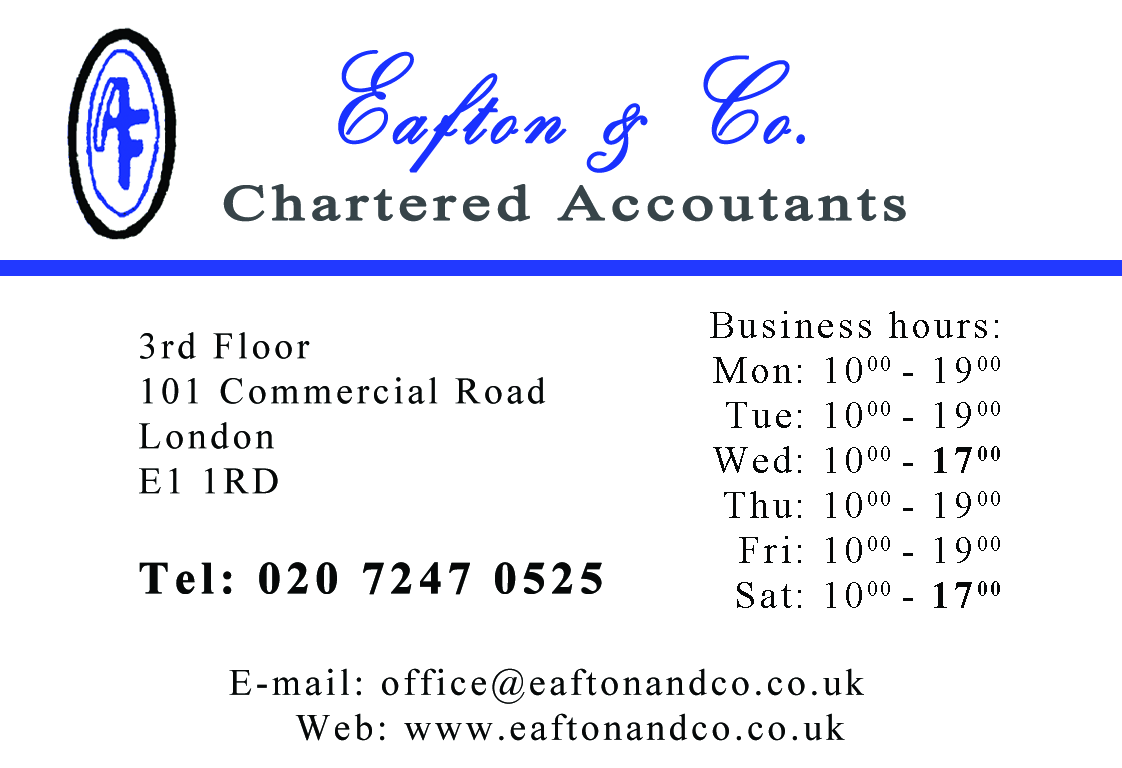
<style>
.page{position:relative;width:1122px;height:768px;background:#ffffff}
.page>*{position:absolute;margin:0}
.t1{font:125px "KunstlerScript";letter-spacing:0.07em;color:#1931ff;font-weight:bold;scale:0.8 1}
.t2{font:50px "TimesNewRomanPSMT";letter-spacing:0.07em;color:#374449;font-weight:bold;scale:1.3 1}
.t3{font:37.5px "TimesNewRomanPSMT";letter-spacing:0.1em;color:#060808}
.t4{font:37.5px "TimesNewRomanPSMT";letter-spacing:0.1em;color:#060808;font-variant:small-caps}
.t5{font:37.5px "TimesNewRomanPS-BoldMT";letter-spacing:0.1em;color:#060808;font-variant:small-caps}
.t6{font:45.8px "TimesNewRomanPS-BoldMT";letter-spacing:0.1em;color:#060808;font-weight:bold}
</style>
<div class="page">
<p class="t1" style="left:338px;top:50px;width:467px;height:123px">Eafton &amp; Co.</p>
<p class="t2" style="left:223px;top:184px;width:683px;height:38px">Chartered Accoutants</p>
<p class="t3" style="left:710px;top:311px;width:290px;height:297px;text-align:right">Business hours:<br>Mon: 1000 <span class="t4">- 1900<br></span>Tue: 1000 <span class="t4">- 1900<br></span>Wed: 1000 <span class="t4">- </span><span class="t5">1700<br></span>Thu: 1000 <span class="t4">- 1900<br></span>Fri: 1000 <span class="t4">- 1900<br></span>Sat: 1000 <span class="t4">- </span><span class="t5">1700</span></p>
<p class="t3" style="left:139px;top:332px;width:463px;height:263px">3rd Floor <br>101 Commercial Road<br>London <br>E1 1RD<br><br><span class="t6">Tel: 020 7247 0525</span></p>
<p class="t3" style="left:229px;top:668px;width:635px;height:73px">E-mail: office@eaftonandco.co.uk<br>     Web: www.eaftonandco.co.uk</p>
</div>
